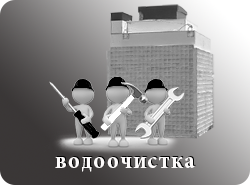
<style>
.page{position:relative;width:250px;height:185px}
.page>*{position:absolute;margin:0}
.t1{font:24px "MinionPro-BoldCnCapt";letter-spacing:0.05em;color:#fdfbfb;font-variant:small-caps}
</style>
<div class="page">
<p class="t1" style="left:55px;top:157px;width:140px;height:15px">водоочистка</p>
</div>
